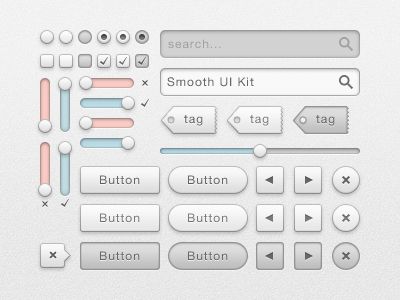
<style>
.page{position:relative;width:400px;height:300px}
.page>*{position:absolute;margin:0}
.t1{font:12.1px "HelveticaNeue";letter-spacing:0.075em;color:#a0a0a0}
.t2{font:12.1px "HelveticaNeue";letter-spacing:0.075em;color:#666666}
.t3{font:12.1px "HelveticaNeue";letter-spacing:0.075em;color:#797979}
.t4{font:11.8px "HelveticaNeue";letter-spacing:0.075em;color:#666666;scale:1.03 1}
</style>
<div class="page">
<p class="t1" style="left:168px;top:39px;width:53px;height:10px">search...</p>
<p class="t2" style="left:167px;top:77px;width:87px;height:10px">Smooth UI Kit</p>
<p class="t2" style="left:184px;top:115px;width:19px;height:11px">tag</p>
<p class="t3" style="left:250px;top:115px;width:19px;height:11px">tag</p>
<p class="t2" style="left:316px;top:115px;width:19px;height:11px">tag</p>
<p class="t4" style="left:100px;top:175px;width:40px;height:10px">Button</p>
<p class="t4" style="left:188px;top:175px;width:40px;height:10px">Button</p>
<p class="t4" style="left:100px;top:213px;width:40px;height:10px">Button</p>
<p class="t4" style="left:188px;top:213px;width:40px;height:10px">Button</p>
<p class="t4" style="left:100px;top:251px;width:40px;height:10px">Button</p>
<p class="t4" style="left:188px;top:251px;width:40px;height:10px">Button</p>
</div>
